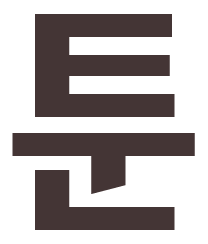
<style>
.page{position:relative;width:208px;height:244px;background:#ffffff}
.page>*{position:absolute;margin:0}
.t1{font:240px "NEXONFootballGothicB";color:#443535}
</style>
<div class="page">
<p class="t1" style="left:12px;top:14px;width:183px;height:216px">툰</p>
</div>
